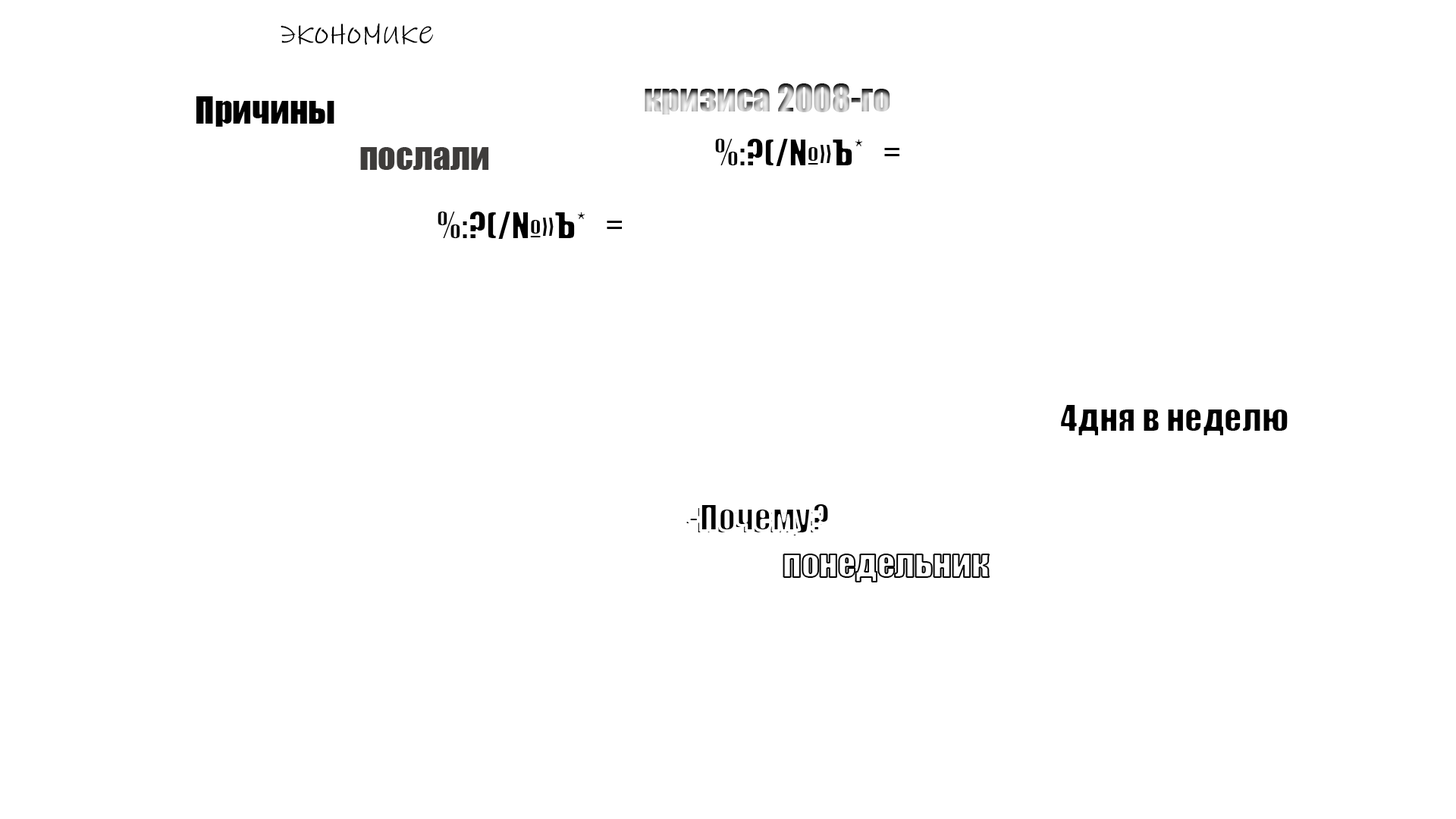
<style>
.page{position:relative;width:1456px;height:819px;background:#ffffff}
.page>*{position:absolute;margin:0}
.t1{font:34.9px "InkFree";color:#000000}
.t2{font:34.9px "Impact"}
.t3{font:34.9px "Impact";color:#000000}
.t4{font:34.9px "Impact";color:#3e3c3b}
</style>
<div class="page">
<p class="t1" style="left:281px;top:24px;width:152px;height:21px">экономике</p>
<p class="t2" style="left:645px;top:83px;width:245px;height:32px">кризиса 2008-го</p>
<p class="t3" style="left:196px;top:96px;width:138px;height:31px">Причины</p>
<p class="t2" style="left:197px;top:93px;width:139px;height:31px">Причины</p>
<p class="t4" style="left:360px;top:147px;width:129px;height:23px">послали</p>
<p class="t3" style="left:714px;top:138px;width:186px;height:33px">%:?(/№»Ъ*_=</p>
<p class="t2" style="left:437px;top:211px;width:186px;height:32px">%:?(/№»Ъ*_=</p>
<p class="t3" style="left:1060px;top:404px;width:228px;height:32px">4дня в неделю</p>
<p class="t2" style="left:689px;top:503px;width:141px;height:31px">-Почему?</p>
</div>
